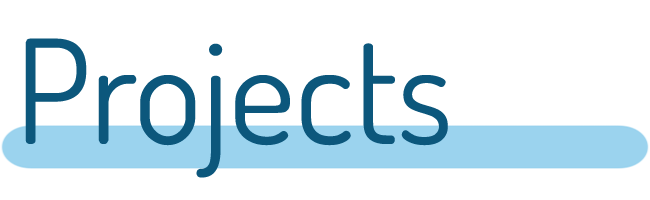
<style>
.page{position:relative;width:650px;height:200px;background:#ffffff}
.page>*{position:absolute;margin:0}
.t1{font:144px "Dosis-Regular";color:#0c577c}
</style>
<div class="page">
<p class="t1" style="left:25px;top:38px;width:423px;height:140px">Projects</p>
</div>
